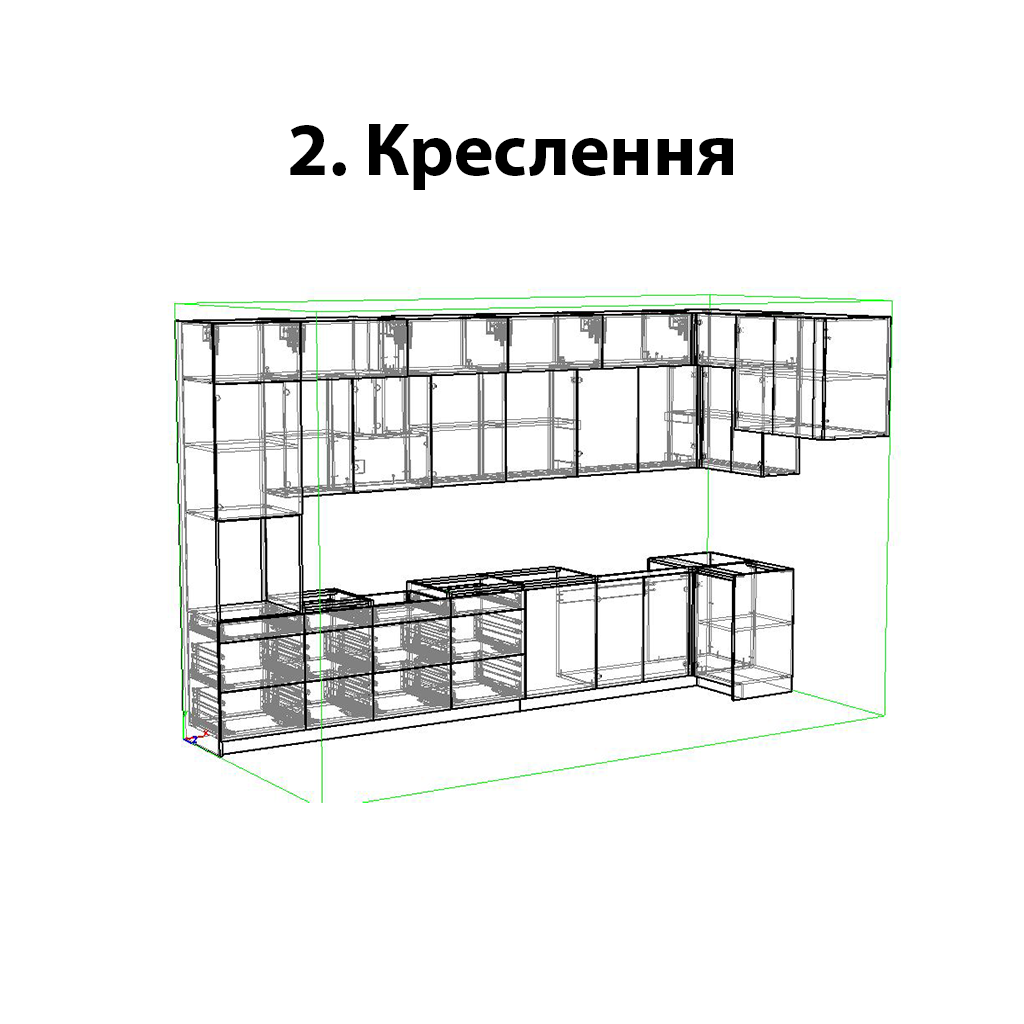
<style>
.page{position:relative;width:1024px;height:1024px;background:#ffffff}
.page>*{position:absolute;margin:0}
.t1{font:75px "MyriadPro-Bold";color:#000000}
</style>
<div class="page">
<p class="t1" style="left:290px;top:124px;width:443px;height:66px">2. Креслення</p>
</div>
